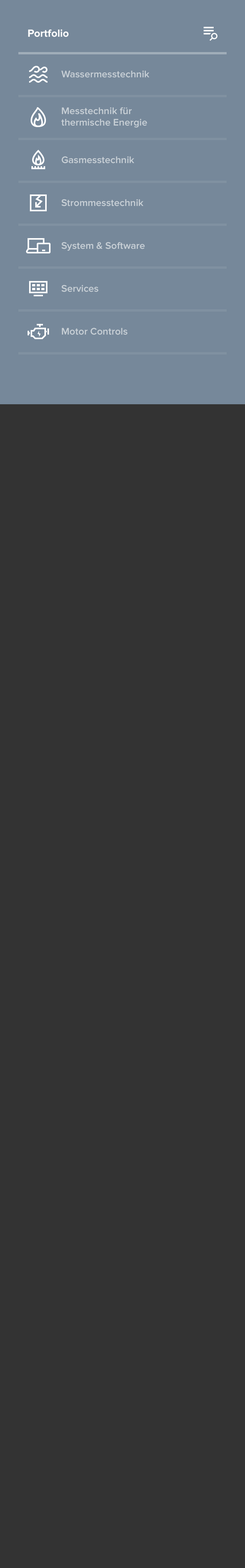
<style>
.page{position:relative;width:245px;height:1568px;background:#333333}
.page>*{position:absolute;margin:0}
.t1{font:10.7px "ProximaNova-Bold";color:#ffffff}
.t2{font:10px "ProximaNova-Semibold";color:#c8d0d6}
.t3{font:10px/11.5px "ProximaNova-Semibold";color:#c8d0d6}
</style>
<div class="page">
<p class="t1" style="left:28px;top:29px;width:41px;height:8px">Portfolio</p>
<p class="t2" style="left:61px;top:70px;width:88px;height:8px">Wassermesstechnik</p>
<p class="t3" style="left:61px;top:107px;width:86px;height:20px">Messtechnik für thermische Energie</p>
<p class="t2" style="left:62px;top:156px;width:72px;height:7px">Gasmesstechnik</p>
<p class="t2" style="left:61px;top:199px;width:83px;height:7px">Strommesstechnik</p>
<p class="t2" style="left:61px;top:242px;width:84px;height:9px">System &amp; Software</p>
<p class="t2" style="left:61px;top:285px;width:37px;height:7px">Services</p>
<p class="t2" style="left:62px;top:328px;width:65px;height:7px">Motor Controls</p>
</div>
